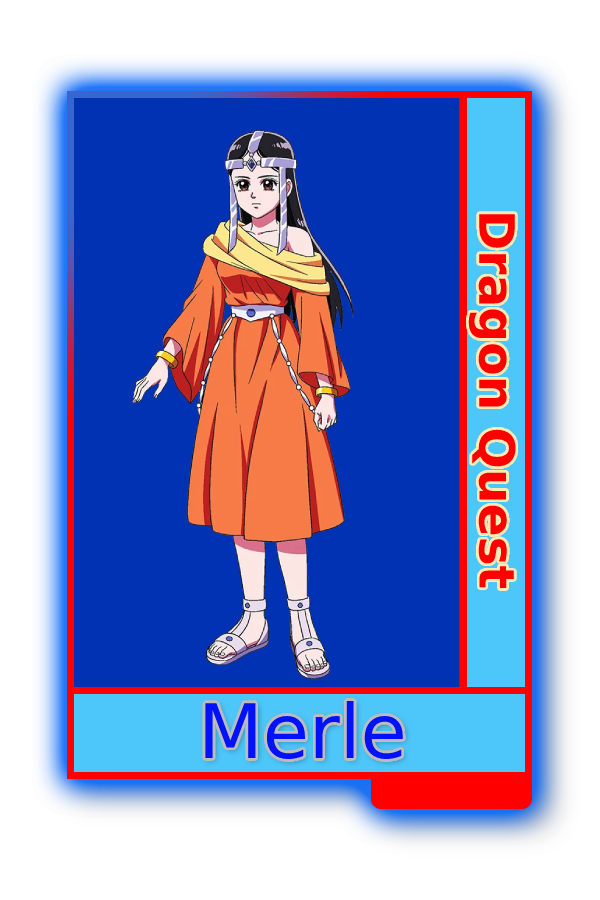
<style>
.page{position:relative;width:600px;height:900px;background:#0032b3}
.page>*{position:absolute;margin:0}
.t1{font:48.8px "MADETOMMY-Bold";color:#ff0000}
.t2{font:75px "CoolveticaRg-Regular";color:#0011fd}
</style>
<div class="page">
<p class="t1" style="left:468px;top:214px;width:48px;height:374px;rotate:90deg">Dragon Quest</p>
<p class="t2" style="left:205px;top:701px;width:198px;height:59px">Merle</p>
</div>
